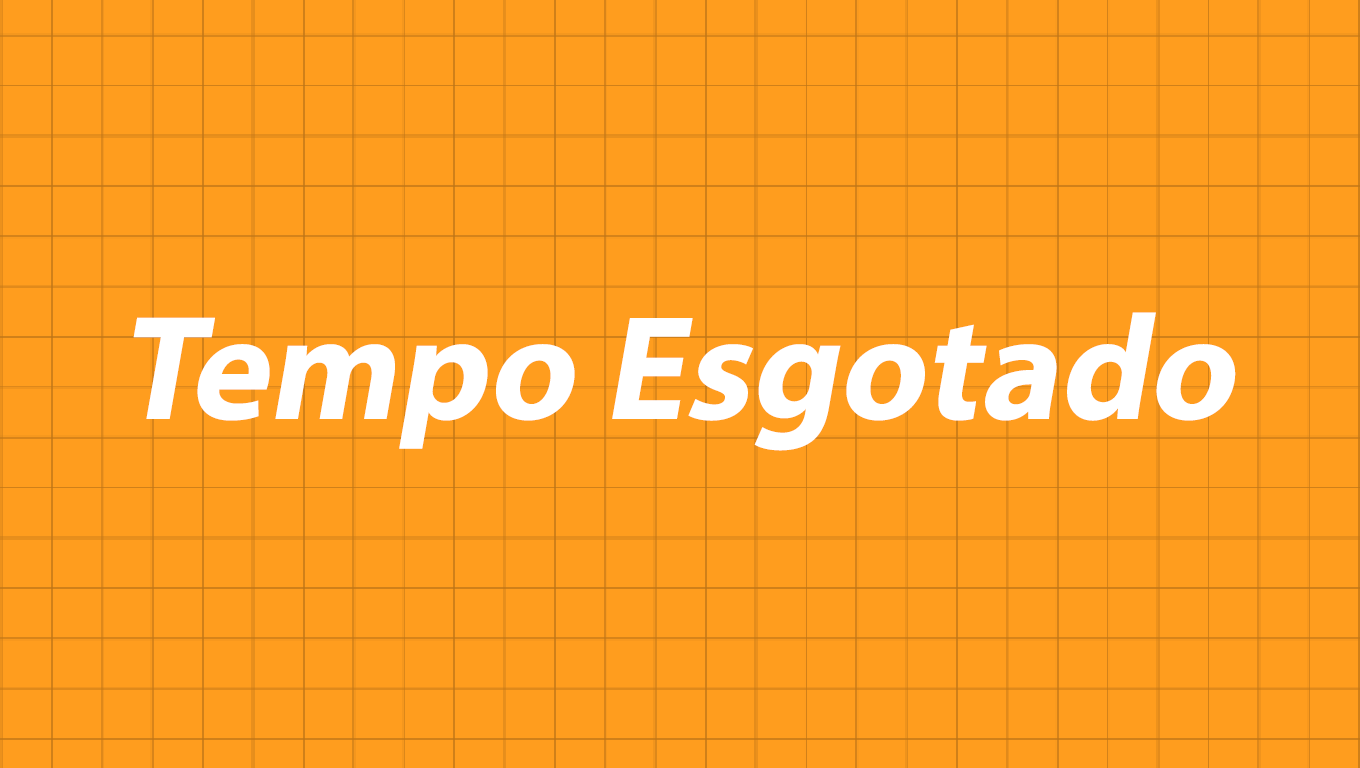
<style>
.page{position:relative;width:1360px;height:768px;background:#ff9d1e}
.page>*{position:absolute;margin:0}
.t1{font:150px "MyriadPro-Bold";color:#ffffff;font-style:italic}
</style>
<div class="page">
<p class="t1" style="left:133px;top:312px;width:1103px;height:139px">Tempo Esgotado</p>
</div>
